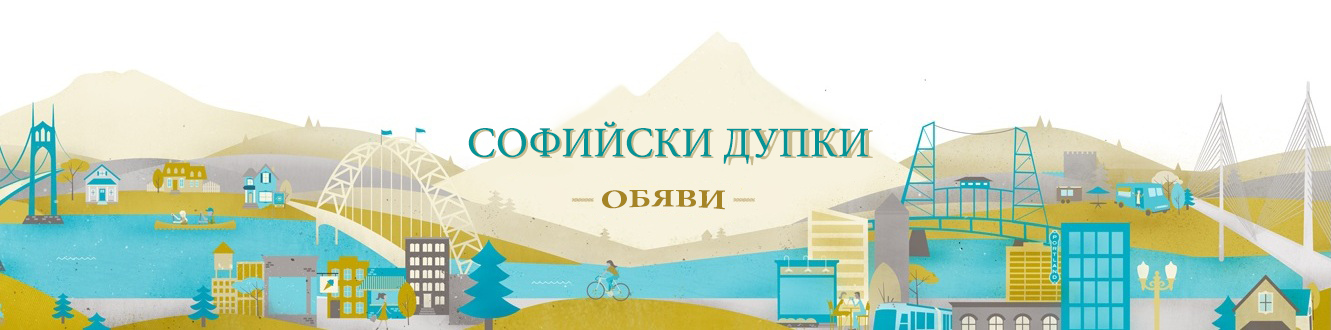
<style>
.page{position:relative;width:1331px;height:330px;background:#ffffff}
.page>*{position:absolute;margin:0}
.t1{font:42.7px "MinionPro-Regular";color:#059395}
.t2{font:42.7px "MinionPro-Regular"}
.t3{font:28.8px "MinionPro-Bold";color:#a58425;scale:1.25 1}
</style>
<div class="page">
<p class="t1" style="left:468px;top:121px;width:400px;height:43px">СОФИЙСКИ ДУПКИ</p>
<p class="t2" style="left:470px;top:123px;width:403px;height:43px">СОФИЙСКИ ДУПКИ</p>
<p class="t3" style="left:602px;top:190px;width:123px;height:20px">ОБЯВИ</p>
</div>
